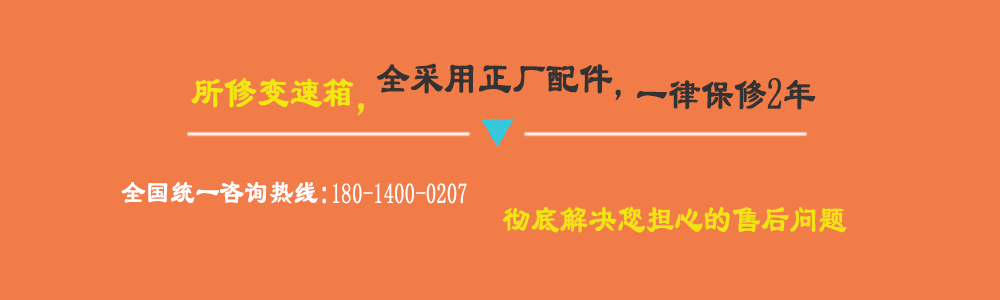
<style>
.page{position:relative;width:1000px;height:300px;background:#f27c48}
.page>*{position:absolute;margin:0}
.t1{font:46.2px "LiSu";color:#343333;font-weight:bold;scale:0.71 1}
.t2{font:39.2px "LiSu";color:#343333;font-weight:bold;scale:0.71 1}
.t3{font:44.8px "LiSu";color:#f2e80f;font-weight:bold;scale:0.71 1}
.t4{font:44.8px "LiSu";color:#f2db17;font-weight:bold;scale:0.71 1}
.t5{font:44.8px "LiSu";color:#343333;font-weight:bold;scale:0.71 1}
.t6{font:28px "LiSu";color:#ffffff;font-weight:bold;scale:0.71 1}
.t7{font:33.6px "LiSu";color:#ffffff;font-weight:bold;scale:0.71 1}
.t8{font:39.2px "LiSu";color:#f2e412;font-weight:bold;scale:0.71 1}
</style>
<div class="page">
<p class="t1" style="left:377px;top:63px;width:244px;height:37px">全采用正厂配件<span class="t2">，</span></p>
<p class="t3" style="left:191px;top:78px;width:173px;height:38px">所修变速箱<span class="t4">，</span></p>
<p class="t5" style="left:637px;top:78px;width:179px;height:32px">一律保修2年</p>
<p class="t6" style="left:121px;top:181px;width:346px;height:23px"><span class="t7">全国统一咨询热线:</span>180-1400-0207</p>
<p class="t8" style="left:503px;top:206px;width:344px;height:27px">彻底解决您担心的售后问题</p>
</div>
